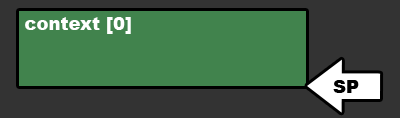
<style>
.page{position:relative;width:400px;height:118px;background:#333333}
.page>*{position:absolute;margin:0}
.t1{font:18px "Arial-Black";color:#ffffff}
.t2{font:18px "Arial-Black";color:#000000}
</style>
<div class="page">
<p class="t1" style="left:25px;top:17px;width:106px;height:17px">context [0]</p>
<p class="t2" style="left:333px;top:80px;width:26px;height:13px">SP</p>
</div>
